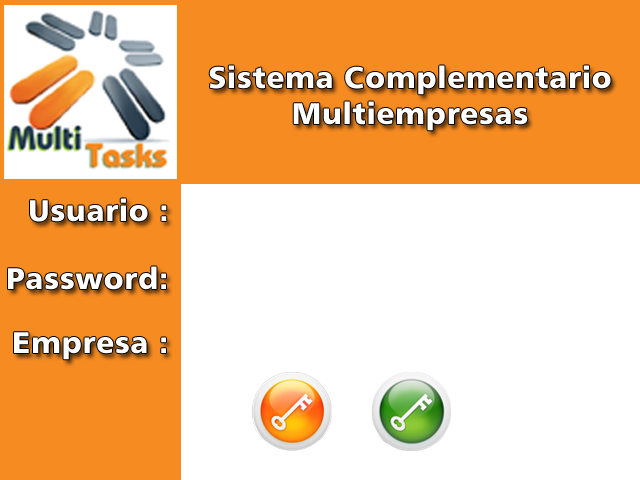
<style>
.page{position:relative;width:640px;height:480px;background:#ffffff}
.page>*{position:absolute;margin:0}
.t1{font:30px "Humanist777BT-BlackB";letter-spacing:0.02em;color:#ffffff}
</style>
<div class="page">
<p class="t1" style="left:209px;top:65px;width:402px;height:66px;text-align:center">Sistema Complementario<br>Multiempresas</p>
<p class="t1" style="left:30px;top:198px;width:137px;height:24px">Usuario :</p>
<p class="t1" style="left:8px;top:266px;width:158px;height:24px">Password:</p>
<p class="t1" style="left:14px;top:332px;width:152px;height:28px">Empresa :</p>
</div>
